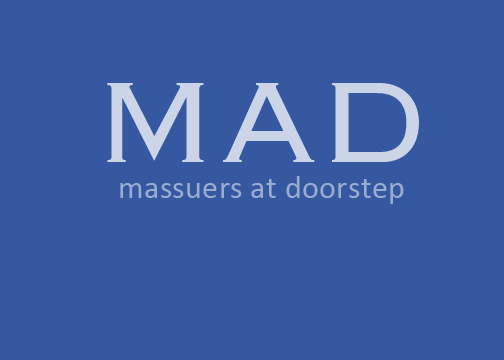
<style>
.page{position:relative;width:504px;height:360px;background:#3558a1}
.page>*{position:absolute;margin:0}
.t1{font:150px "Copperplate-Light";letter-spacing:0.005em;color:#ccd5e7}
.t2{font:32px "Calibri";letter-spacing:0.01em;color:#9aacd0}
</style>
<div class="page">
<p class="t1" style="left:107px;top:83px;width:312px;height:79px">MAD</p>
<p class="t2" style="left:120px;top:176px;width:284px;height:28px">massuers at doorstep</p>
</div>
